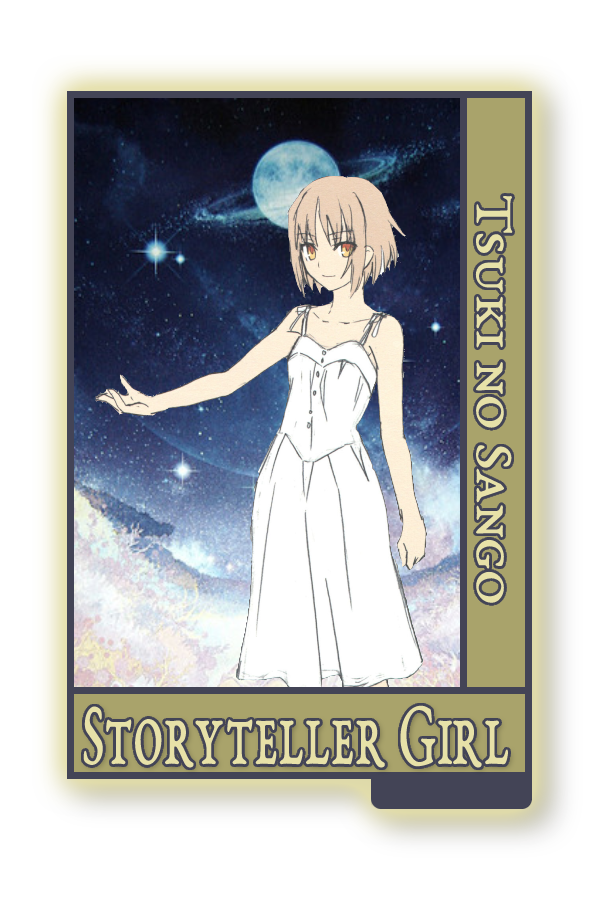
<style>
.page{position:relative;width:600px;height:900px;background:#ffffff}
.page>*{position:absolute;margin:0}
.t1{font:57.9px "EBGaramondSC08-Regular";color:#e7e1a8;scale:1.1 1}
.t2{font:95.8px "EBGaramondSC08-Regular";color:#e7e1a8;scale:0.57 1}
</style>
<div class="page">
<p class="t1" style="left:475px;top:196px;width:38px;height:407px;rotate:90deg">Tsuki no Sango</p>
<p class="t2" style="left:83px;top:705px;width:426px;height:63px">Storyteller Girl</p>
</div>
